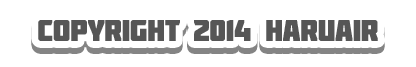
<style>
.page{position:relative;width:416px;height:67px;background:#ffffff}
.page>*{position:absolute;margin:0}
.t1{font:30px "Molot";letter-spacing:-0.02em}
.t2{font:30px "Molot";letter-spacing:-0.02em;color:#565656}
</style>
<div class="page">
<p class="t1" style="left:38px;top:26px;width:340px;height:21px">copyright 2014 haruair</p>
<p class="t2" style="left:38px;top:20px;width:340px;height:21px">copyright 2014 haruair</p>
</div>
